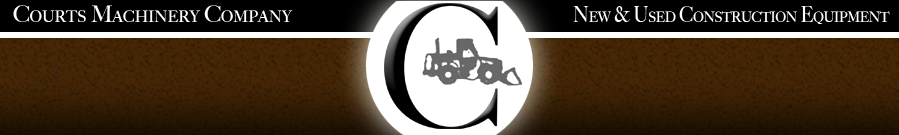
<style>
.page{position:relative;width:899px;height:135px}
.page>*{position:absolute;margin:0}
.t1{font:22.8px "BigCaslon-Medium";color:#ffffff;font-variant:small-caps;scale:0.95 1}
.t2{font:22px "BigCaslon-Medium";color:#ffffff;font-variant:small-caps;scale:0.82 1}
</style>
<div class="page">
<p class="t1" style="left:13px;top:5px;width:280px;height:17px">Courts Machinery Company</p>
<p class="t2" style="left:573px;top:6px;width:317px;height:18px">New &amp; Used Construction Equipment</p>
</div>
